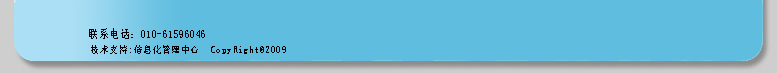
<style>
.page{position:relative;width:777px;height:73px;background:#5fbddf}
.page>*{position:absolute;margin:0}
.t1{font:11.6px "NSimSun";letter-spacing:0.05em;color:#020409;scale:0.86 1}
.t2{font:10.4px "NSimSun";letter-spacing:0.05em;color:#010309;scale:0.86 1}
</style>
<div class="page">
<p class="t1" style="left:89px;top:28px;width:116px;height:11px">联系电话：010-61596046</p>
<p class="t2" style="left:91px;top:45px;width:195px;height:9px">技术支持:信息化管理中心  CopyRight@2009</p>
</div>
